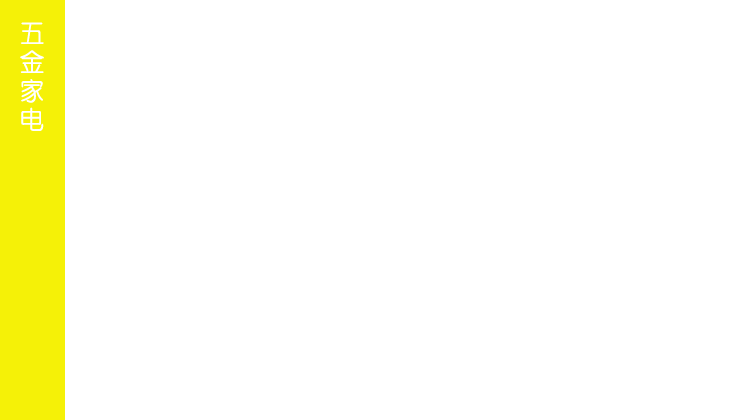
<style>
.page{position:relative;width:736px;height:420px;background:#ffffff}
.page>*{position:absolute;margin:0}
.t1{font:24px "FZY1JW--GB1-0";color:#ffffff;font-weight:bold}
</style>
<div class="page">
<p class="t1" style="left:20px;top:22px;width:24px;height:109px">五<br>金<br>家<br>电</p>
</div>
